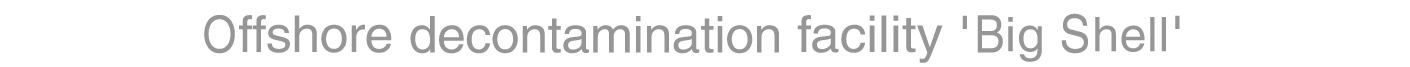
<style>
.page{position:relative;width:1410px;height:67px;background:#ffffff}
.page>*{position:absolute;margin:0}
.t1{font:50.7px "Helvetica";letter-spacing:-0.012em;color:#969696;scale:0.86 1}
.t2{font:50.7px "Helvetica";letter-spacing:-0.012em;color:#969696}
.t3{font:50.7px "Helvetica";letter-spacing:-0.01em;color:#969696}
.t4{font:50.7px "Helvetica";color:#969696;scale:1.05 1}
.t5{font:51.4px "Helvetica";letter-spacing:-0.012em;color:#969696;scale:1.1 1}
.t6{font:51.8px "Helvetica";letter-spacing:-0.02em;color:#969696;scale:0.88 1}
.t7{font:47.7px "Helvetica";letter-spacing:0.02em;color:#969696;scale:1.04 1}
.t8{font:52.1px "Helvetica";letter-spacing:-0.02em;color:#969696;scale:0.88 1}
.t9{font:47.7px "Helvetica";letter-spacing:0.01em;color:#969696}
</style>
<div class="page">
<p class="t1" style="left:204px;top:15px;width:31px;height:39px">O</p>
<p class="t2" style="left:239px;top:15px;width:153px;height:38px">ffshore</p>
<p class="t3" style="left:410px;top:16px;width:369px;height:38px">decontamination</p>
<p class="t4" style="left:797px;top:15px;width:146px;height:48px">facility</p>
<p class="t5" style="left:962px;top:15px;width:5px;height:14px">'</p>
<p class="t6" style="left:977px;top:15px;width:26px;height:38px">B</p>
<p class="t7" style="left:1008px;top:17px;width:34px;height:45px">ig</p>
<p class="t8" style="left:1061px;top:13px;width:27px;height:41px">S</p>
<p class="t9" style="left:1095px;top:17px;width:71px;height:35px">hell</p>
<p class="t5" style="left:1175px;top:15px;width:5px;height:14px">'</p>
</div>
